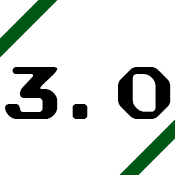
<style>
.page{position:relative;width:175px;height:175px;background:#ffffff}
.page>*{position:absolute;margin:0}
.t1{font:61px "ArcadeRounded";letter-spacing:-0.1em;color:#000000}
.t2{font:61px "ArcadeRounded";color:#000000}
</style>
<div class="page">
<p class="t1" style="left:5px;top:67px;width:166px;height:52px"><span class="t2">3</span>.0</p>
</div>
